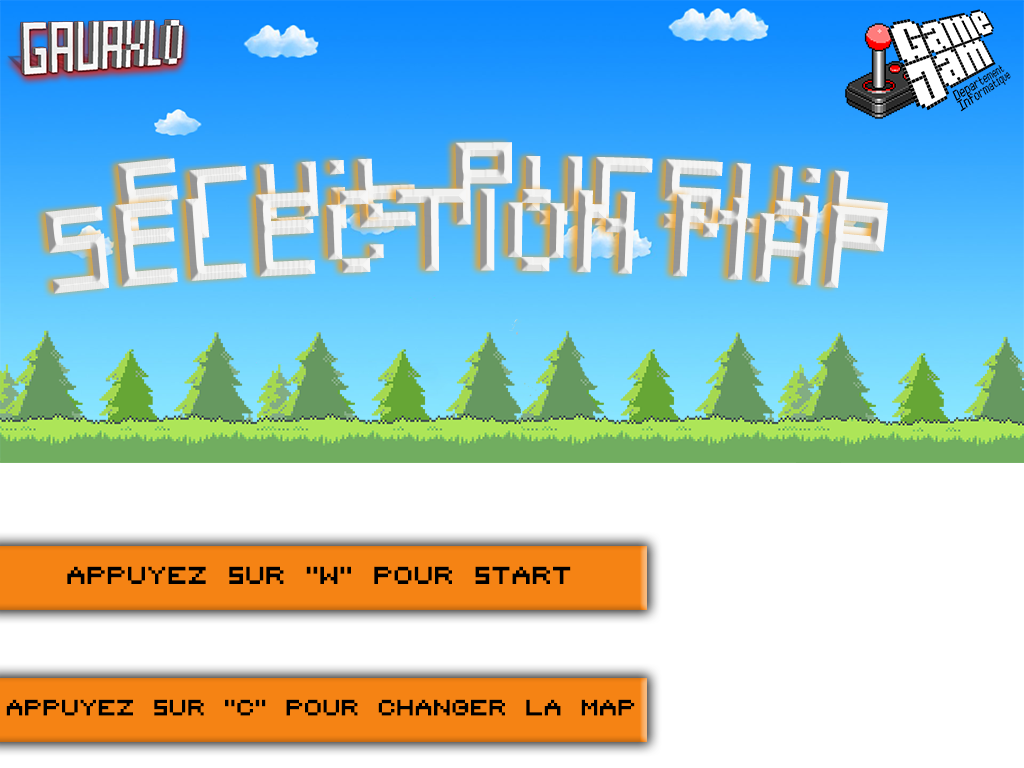
<style>
.page{position:relative;width:1024px;height:768px;background:#ffffff}
.page>*{position:absolute;margin:0}
.t1{font:68px "Pixeled";color:#f4f4f3}
.t2{font:27px "8_bit_1_6";color:#000000}
.t3{font:17px "Pixeled";color:#000000}
.t4{font:24.6px "8_bit_1_6";color:#000000}
.t5{font:15.5px "Pixeled";color:#000000}
</style>
<div class="page">
<p class="t1" style="left:117px;top:142px;width:771px;height:104px">Fruit Pursuit</p>
<p class="t1" style="left:45px;top:188px;width:843px;height:106px">SELECTION MAP</p>
<p class="t2" style="left:67px;top:566px;width:504px;height:18px">Appuyez <span class="t3">s</span>ur "w" pour <span class="t3">s</span>tart</p>
<p class="t4" style="left:6px;top:699px;width:629px;height:17px">Appuyez <span class="t5">s</span>ur "c" pour changer la map</p>
</div>
